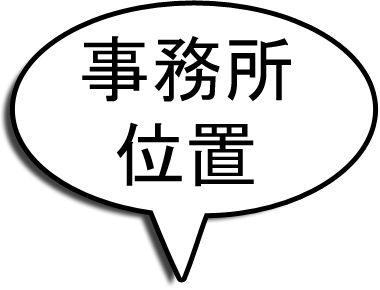
<style>
.page{position:relative;width:380px;height:290px;background:#ffffff}
.page>*{position:absolute;margin:0}
.t1{font:72px "MS-Gothic";color:#000000}
</style>
<div class="page">
<p class="t1" style="left:82px;top:36px;width:209px;height:66px">事務所</p>
<p class="t1" style="left:117px;top:122px;width:137px;height:65px">位置</p>
</div>
